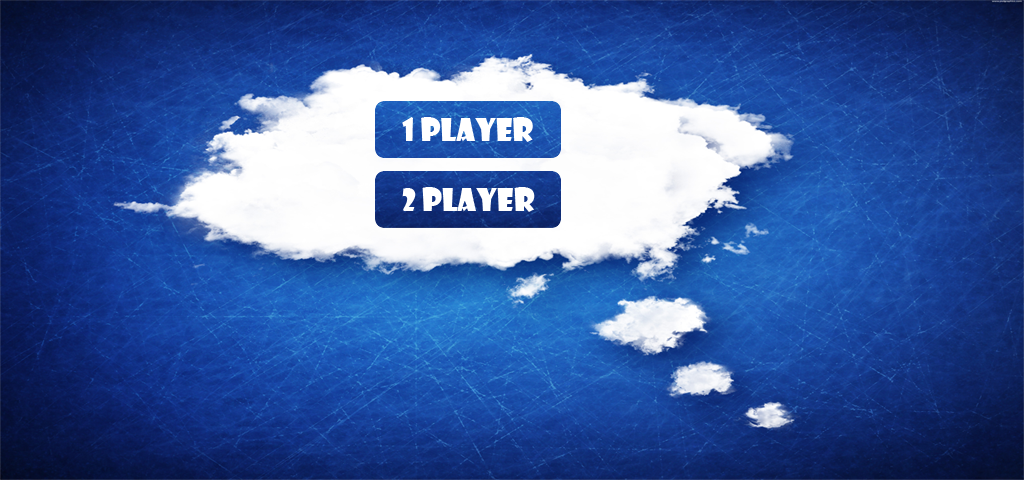
<style>
.page{position:relative;width:1024px;height:480px}
.page>*{position:absolute;margin:0}
.t1{font:30px "ShowcardGothic-Reg";color:#ffffff}
</style>
<div class="page">
<p class="t1" style="left:402px;top:117px;width:131px;height:25px">1 player</p>
<p class="t1" style="left:402px;top:187px;width:133px;height:25px">2 player</p>
</div>
